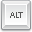
<style>
.page{position:relative;width:32px;height:32px}
.page>*{position:absolute;margin:0}
.t1{font:8px "ArialMT";color:#585858}
</style>
<div class="page">
<p class="t1" style="left:10px;top:12px;width:13px;height:6px">ALT</p>
</div>
